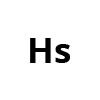
<style>
.page{position:relative;width:100px;height:100px;background:#ffffff}
.page>*{position:absolute;margin:0}
.t1{font:35px "OpenSans-Bold";color:#000000}
</style>
<div class="page">
<p class="t1" style="left:30px;top:38px;width:40px;height:25px">Hs</p>
</div>
